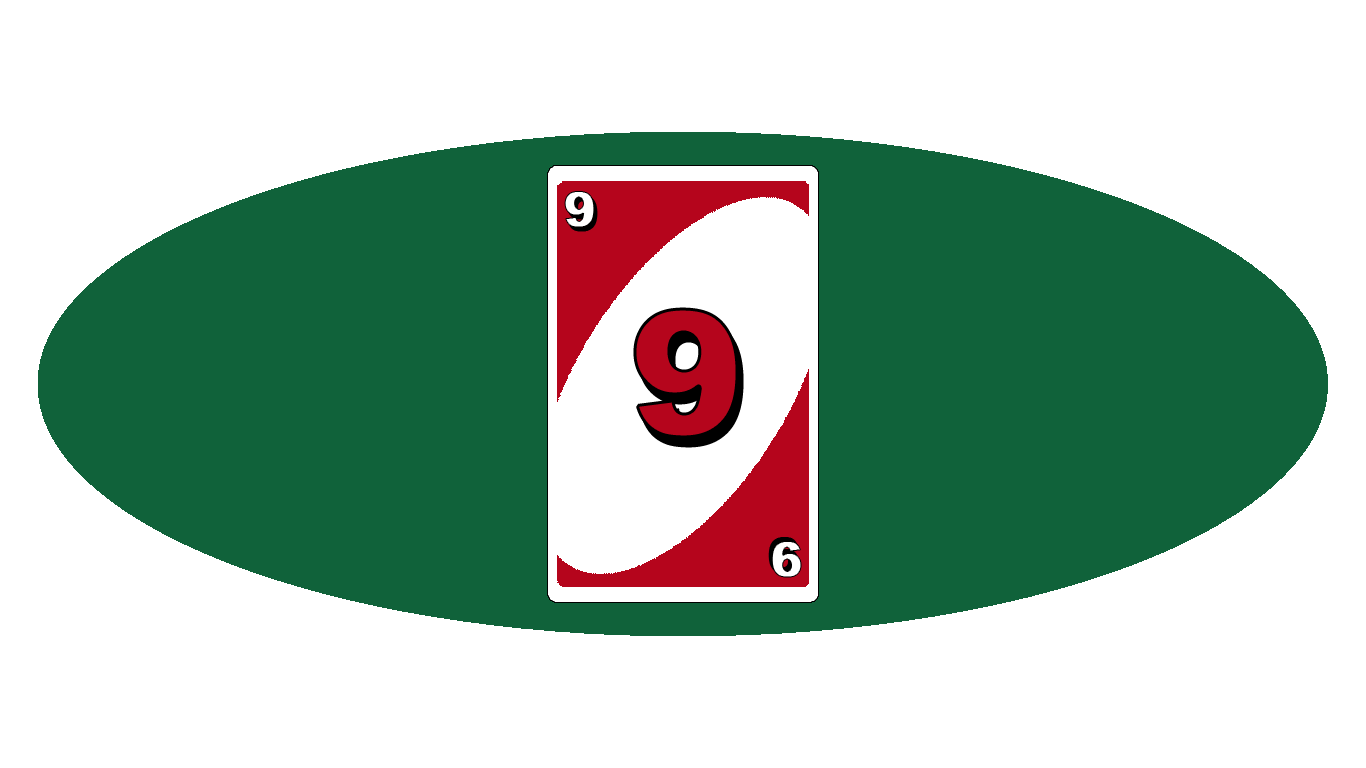
<style>
.page{position:relative;width:1366px;height:768px;background:#ffffff}
.page>*{position:absolute;margin:0}
.t1{font:48px "Arial-Black";color:#ffffff;font-weight:bold}
.t2{font:170px "Arial-Black";color:#b5051c;font-weight:bold}
</style>
<div class="page">
<p class="t1" style="left:564px;top:191px;width:31px;height:37px">9</p>
<p class="t2" style="left:633px;top:307px;width:106px;height:132px">9</p>
<p class="t1" style="left:771px;top:541px;width:31px;height:37px;rotate:180deg">9</p>
</div>
